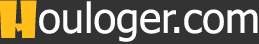
<style>
.page{position:relative;width:259px;height:44px;background:#333333}
.page>*{position:absolute;margin:0}
.t1{font:50px "ShowcardGothic-Reg";color:#ffbe1a}
.t2{font:41.7px "Tahoma";color:#fefefe}
</style>
<div class="page">
<p class="t1" style="left:0px;top:0px;width:37px;height:38px">H</p>
<p class="t2" style="left:39px;top:1px;width:219px;height:41px">ouloger.com</p>
</div>
